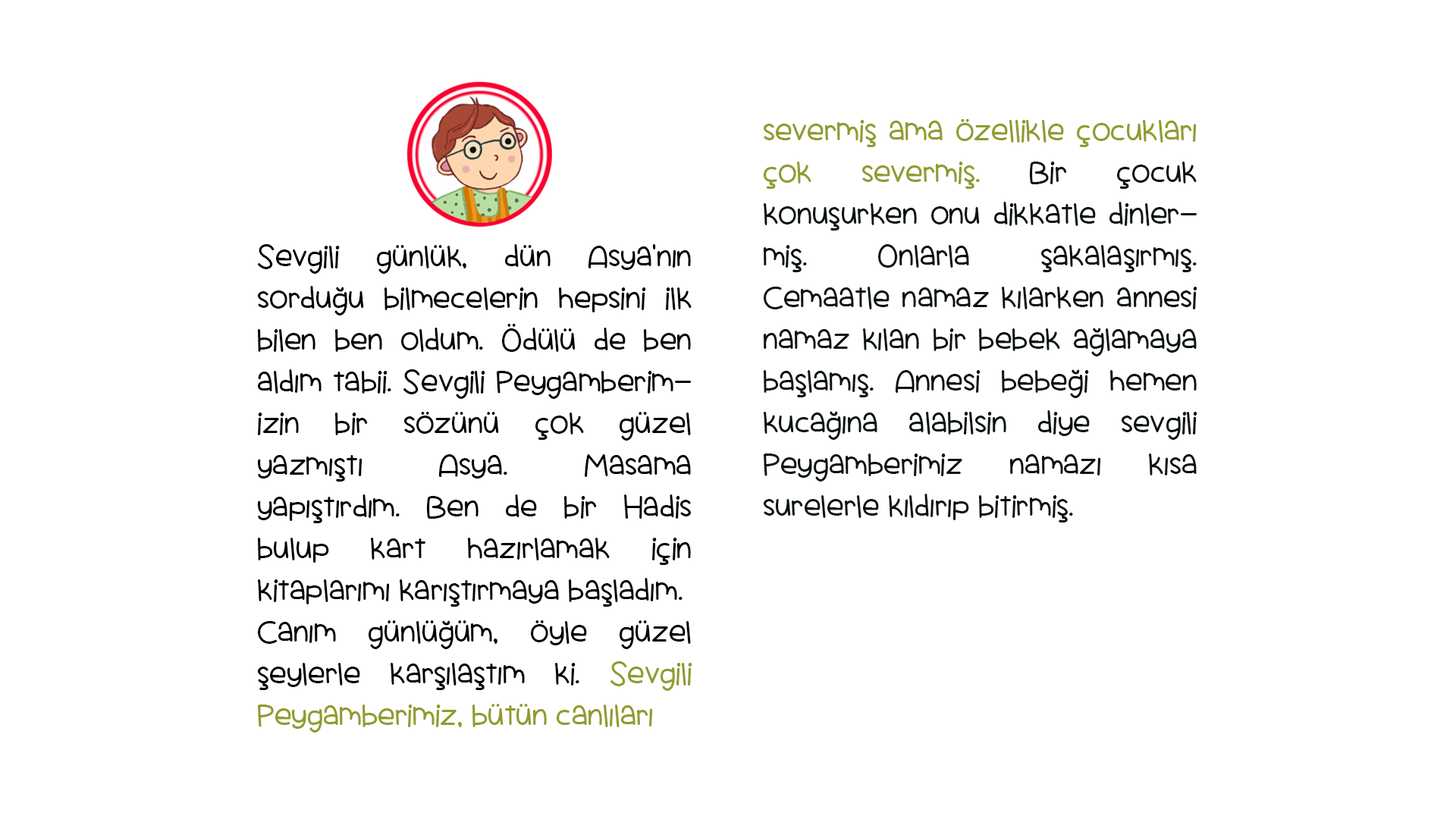
<style>
.page{position:relative;width:1456px;height:819px;background:#ffffff}
.page>*{position:absolute;margin:0}
.t1{font:34.8px "ScrambledTofu";color:#091311}
.t2{font:34.8px "ScrambledTofu";color:#919b2c}
.t3{font:34.8px "ScrambledTofu";color:#000000}
</style>
<div class="page">
<p class="t1" style="left:764px;top:119px;width:433px;height:403px;text-align:justify"><span class="t2">severmiş ama özellikle çocukları çok severmiş.</span> Bir çocuk konuşurken onu dikkatle dinlermiş. Onlarla şakalaşırmış. Cemaatle namaz kılarken annesi namaz kılan bir bebek ağlamaya başlamış. Annesi bebeği hemen kucağına alabilsin diye sevgili Peygamberimiz namazı kısa surelerle kıldırıp bitirmiş.</p>
<p class="t3" style="left:258px;top:244px;width:434px;height:489px;text-align:justify">Sevgili günlük, dün Asya’nın sorduğu bilmecelerin hepsini ilk bilen ben oldum. Ödülü de ben aldım tabii. Sevgili Peygamberimizin bir sözünü çok güzel yazmıştı Asya. Masama yapıştırdım. Ben de bir Hadis bulup kart hazırlamak için kitaplarımı karıştırmaya başladım.<br>Canım günlüğüm, öyle güzel şeylerle karşılaştım ki. <span class="t2">Sevgili Peygamberimiz, bütün canlıları</span></p>
</div>
